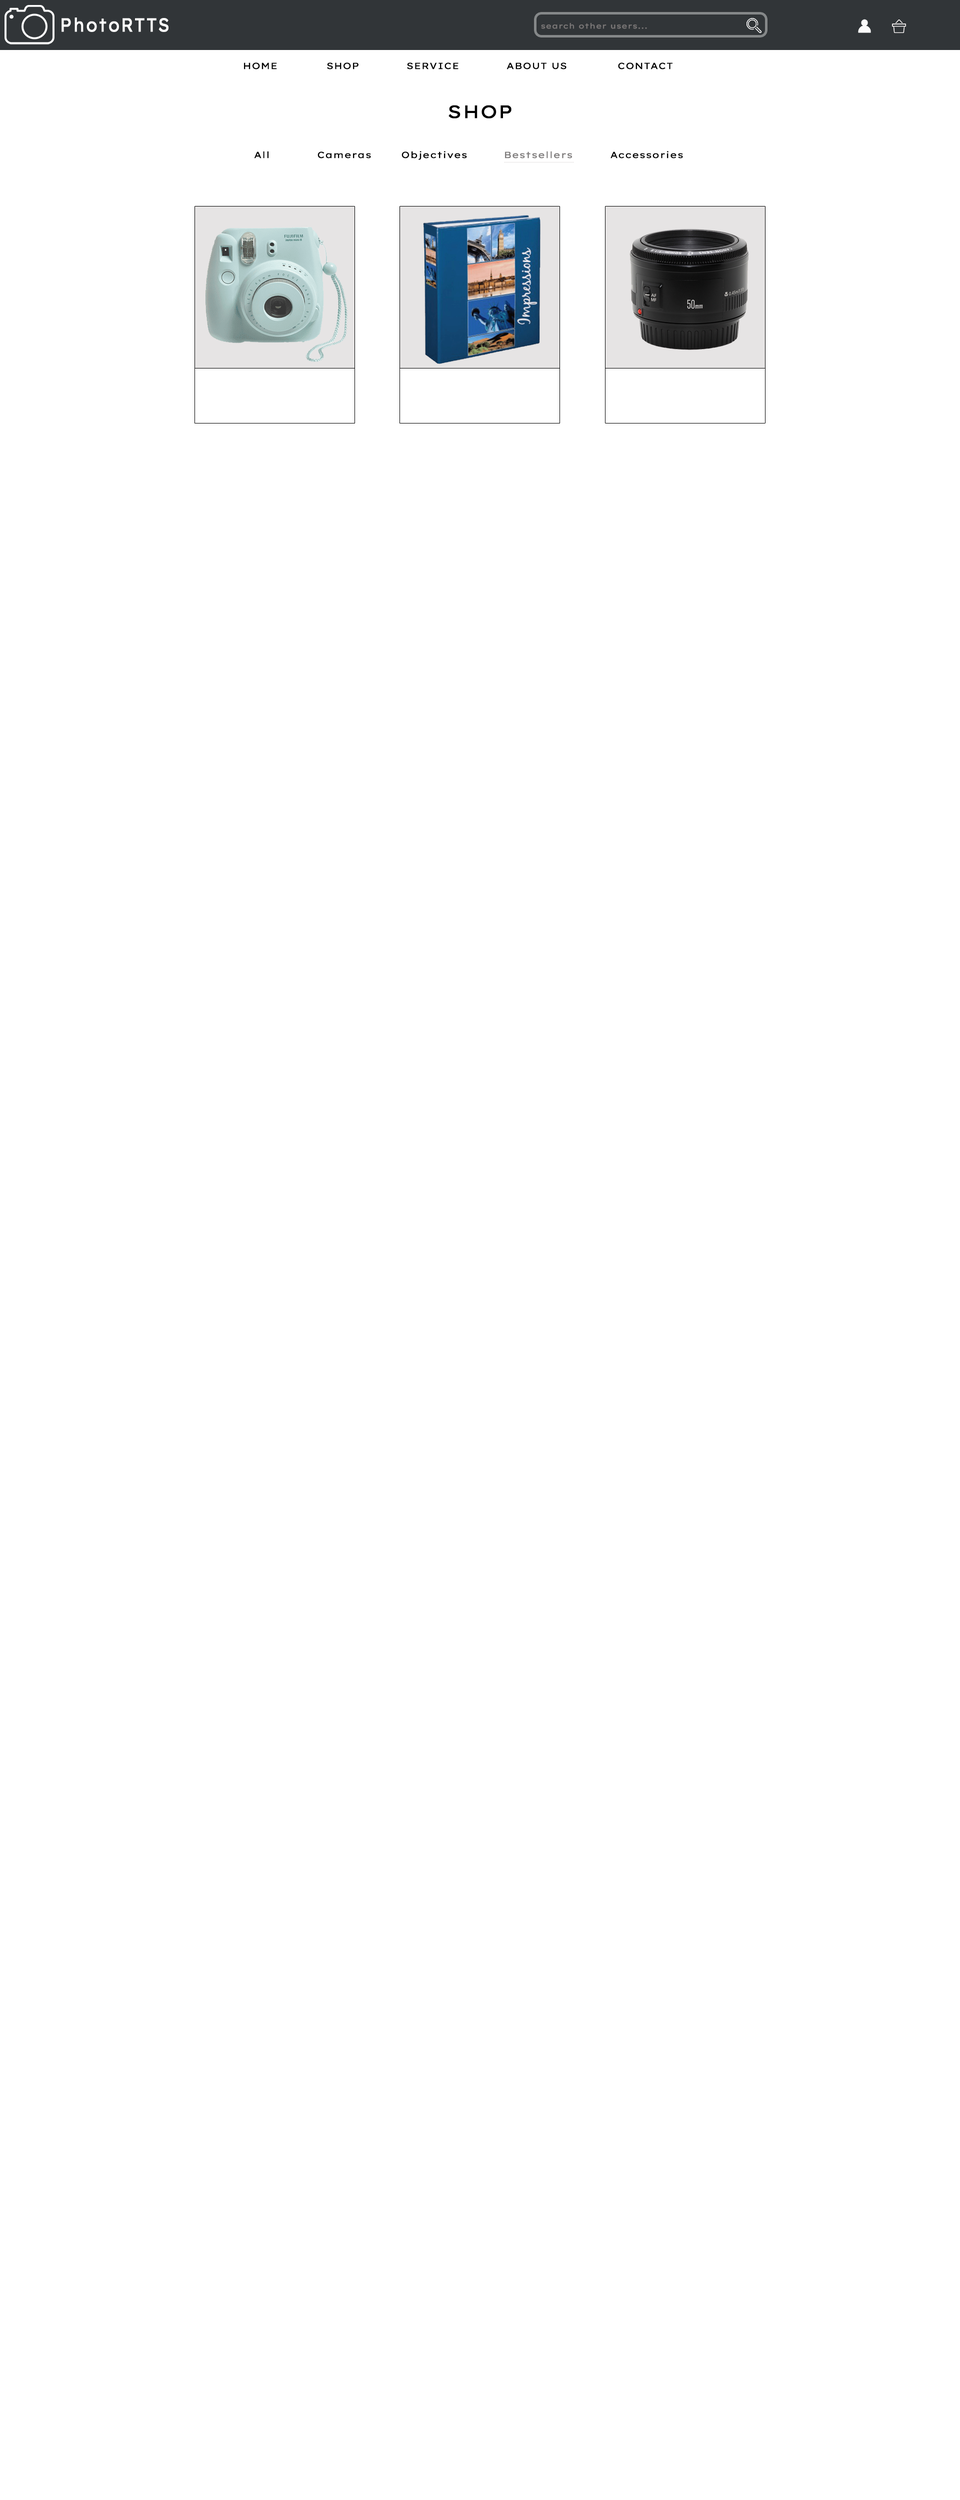
<style>
.page{position:relative;width:960px;height:2500px;background:#ffffff}
.page>*{position:absolute;margin:0}
.t1{font:19px "LexendGiga-Regular";letter-spacing:0.02em;color:#ffffff;font-weight:bold;scale:0.79 1}
.t2{font:7.4px "LexendGiga-Regular";letter-spacing:0.02em;color:#797676;font-weight:bold}
.t3{font:9px "LexendGiga-Regular";letter-spacing:0.02em;color:#000000;font-weight:bold}
.t4{font:18px "LexendGiga-Regular";letter-spacing:0.02em;color:#000000;font-weight:bold}
.t5{font:9px "LexendGiga-Regular";letter-spacing:0.02em;color:#807d7d;font-weight:bold}
</style>
<div class="page">
<p class="t1" style="left:62px;top:18px;width:106px;height:14px">PhotoRTTS</p>
<p class="t2" style="left:541px;top:22px;width:106px;height:7px">search other users...</p>
<p class="t3" style="left:244px;top:62px;width:33px;height:8px">HOME</p>
<p class="t3" style="left:327px;top:62px;width:31px;height:8px">SHOP</p>
<p class="t3" style="left:407px;top:62px;width:51px;height:8px">SERVICE</p>
<p class="t3" style="left:506px;top:62px;width:60px;height:8px">ABOUT US</p>
<p class="t3" style="left:618px;top:62px;width:54px;height:8px">CONTACT</p>
<p class="t4" style="left:448px;top:105px;width:64px;height:13px">SHOP</p>
<p class="t3" style="left:254px;top:151px;width:14px;height:7px">All</p>
<p class="t3" style="left:318px;top:152px;width:53px;height:6px">Cameras</p>
<p class="t3" style="left:402px;top:151px;width:65px;height:9px">Objectives</p>
<p class="t5" style="left:505px;top:151px;width:67px;height:7px">Bestsellers</p>
<p class="t3" style="left:610px;top:151px;width:73px;height:7px">Accessories</p>
</div>
